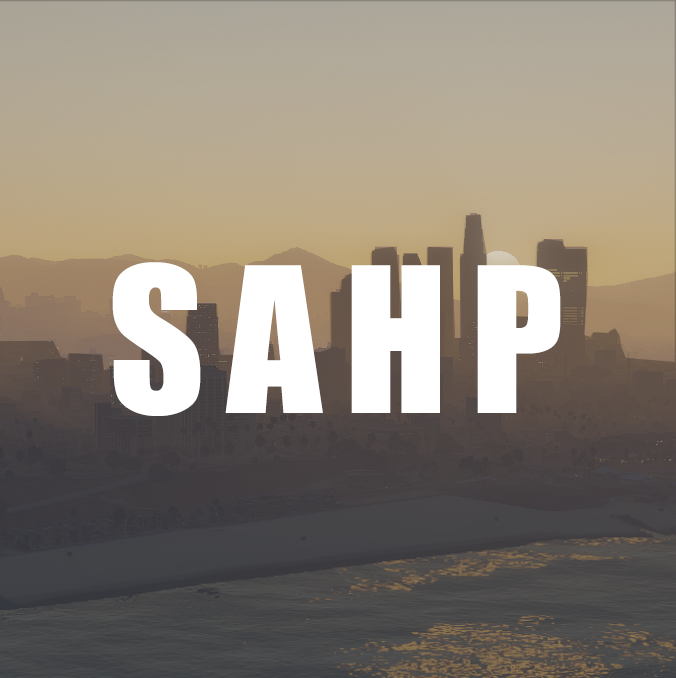
<style>
.page{position:relative;width:676px;height:678px}
.page>*{position:absolute;margin:0}
.t1{font:186.7px "Impact";letter-spacing:0.12em;color:#ffffff}
</style>
<div class="page">
<p class="t1" style="left:112px;top:262px;width:449px;height:154px">SAHP</p>
</div>
